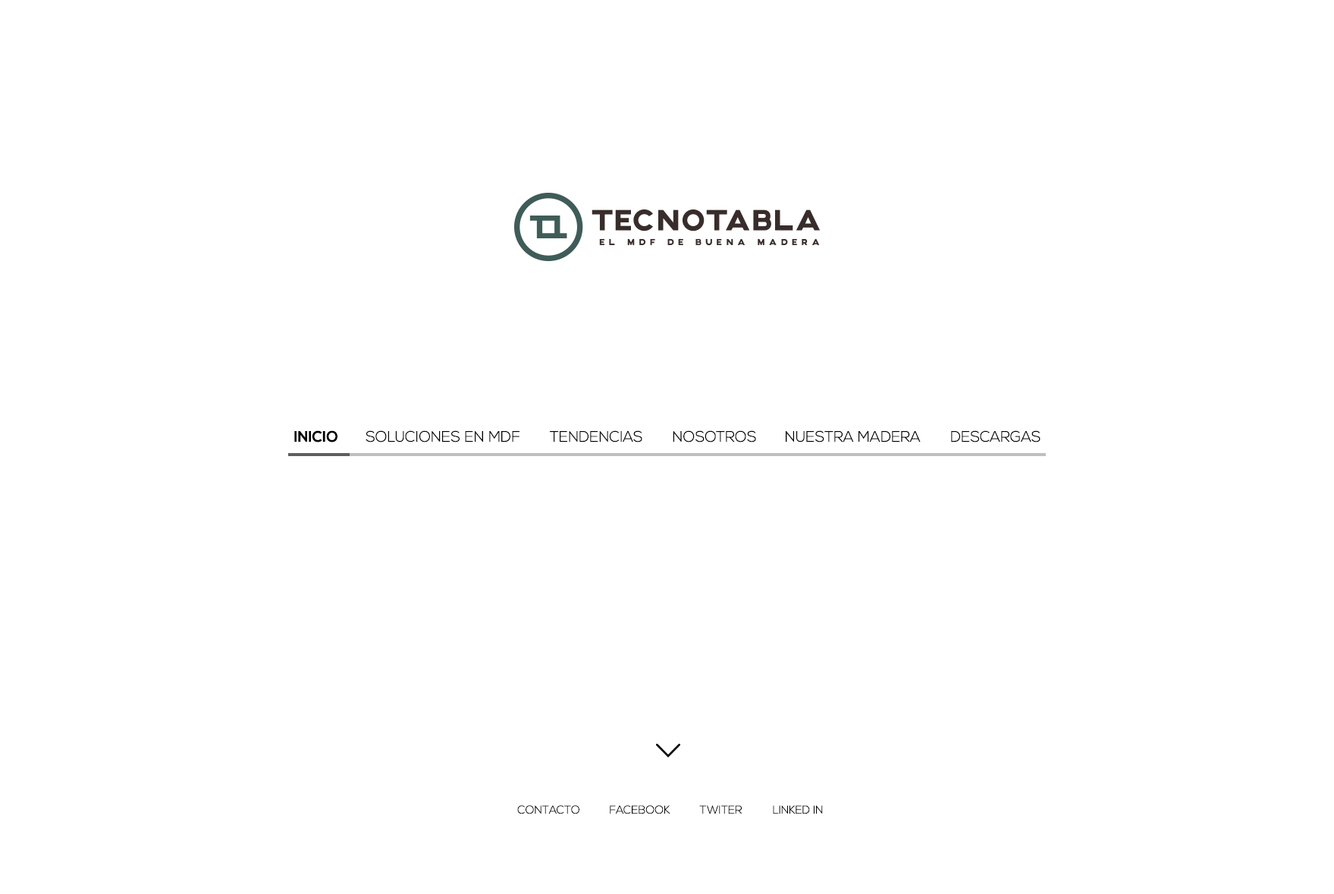
<style>
.page{position:relative;width:1334px;height:894px;background:#ffffff}
.page>*{position:absolute;margin:0}
.t1{font:15.2px "NexaBold";color:#000000}
.t2{font:15.2px "NexaLight";color:#000000}
.t3{font:11.4px "NexaLight";color:#000000}
</style>
<div class="page">
<p class="t1" style="left:294px;top:430px;width:44px;height:12px">INICIO</p>
<p class="t2" style="left:366px;top:430px;width:154px;height:12px">SOLUCIONES EN MDF</p>
<p class="t2" style="left:550px;top:430px;width:93px;height:12px">TENDENCIAS</p>
<p class="t2" style="left:673px;top:430px;width:83px;height:12px">NOSOTROS</p>
<p class="t2" style="left:786px;top:430px;width:135px;height:12px">NUESTRA MADERA</p>
<p class="t2" style="left:951px;top:430px;width:90px;height:12px">DESCARGAS</p>
<p class="t3" style="left:517px;top:805px;width:63px;height:9px">CONTACTO</p>
<p class="t3" style="left:610px;top:805px;width:61px;height:9px">FACEBOOK</p>
<p class="t3" style="left:699px;top:805px;width:44px;height:9px">TWITER</p>
<p class="t3" style="left:773px;top:805px;width:50px;height:9px">LINKED IN</p>
</div>
